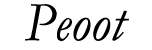
<style>
.page{position:relative;width:152px;height:50px;background:#ffffff}
.page>*{position:absolute;margin:0}
.t1{font:55.8px "Garamond-Italic";color:#000000}
</style>
<div class="page">
<p class="t1" style="left:25px;top:4px;width:104px;height:38px">Peoot</p>
</div>
